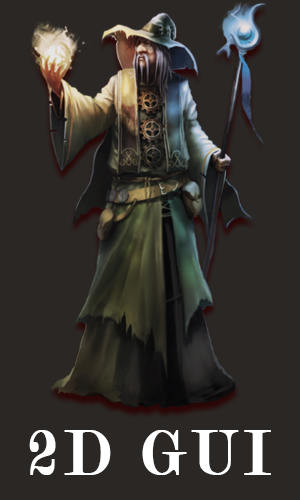
<style>
.page{position:relative;width:300px;height:500px;background:#2a2724}
.page>*{position:absolute;margin:0}
.t1{font:67.4px "Modern-Regular";letter-spacing:0.1em;color:#ffffff;font-weight:bold;scale:0.93 1}
</style>
<div class="page">
<p class="t1" style="left:29px;top:430px;width:242px;height:45px">2D GUI</p>
</div>
